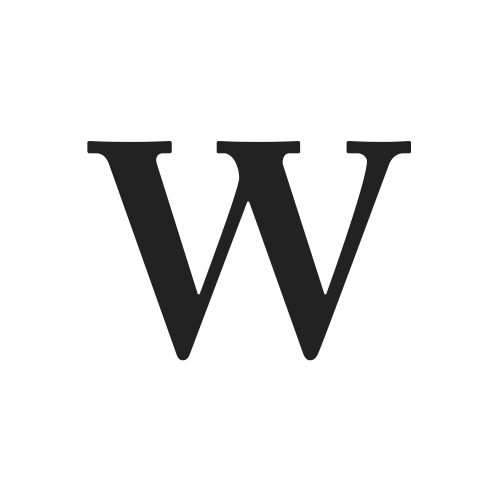
<style>
.page{position:relative;width:500px;height:500px;background:#ffffff}
.page>*{position:absolute;margin:0}
.t1{font:300px "ACaslonPro-Bold";color:#222222}
</style>
<div class="page">
<p class="t1" style="left:87px;top:141px;width:324px;height:220px">W</p>
</div>
